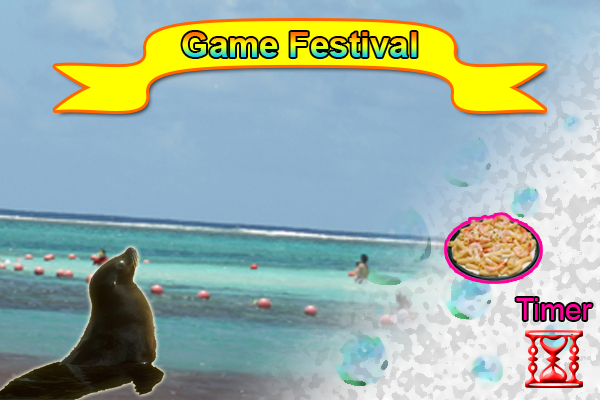
<style>
.page{position:relative;width:600px;height:400px}
.page>*{position:absolute;margin:0}
.t1{font:35px "Arial-BoldMT"}
.t2{font:30px "ArialMT";color:#ff0099}
</style>
<div class="page">
<p class="t1" style="left:182px;top:32px;width:235px;height:25px">Game Festival</p>
<p class="t2" style="left:516px;top:298px;width:76px;height:22px">Timer</p>
</div>
